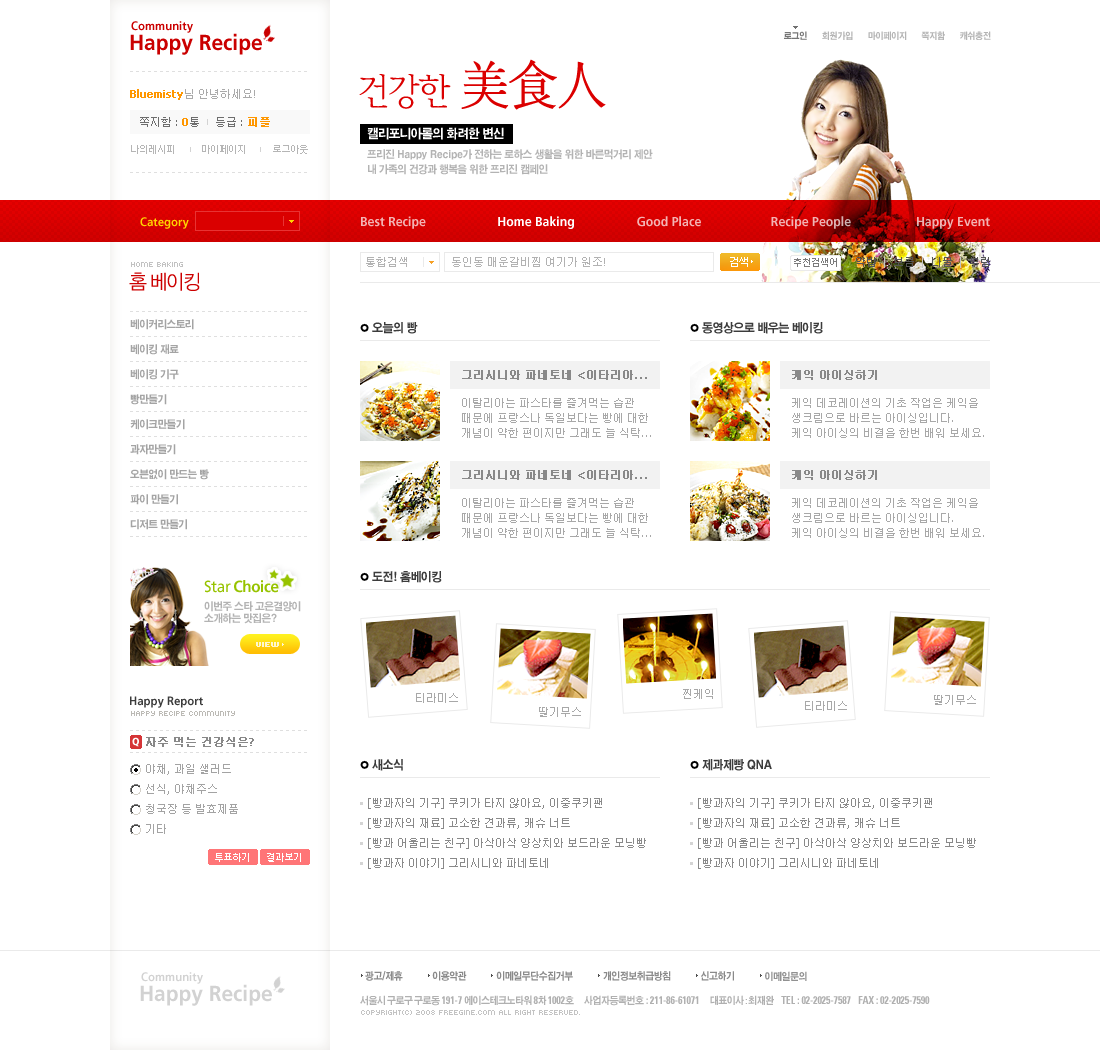
<style>
.page{position:relative;width:1100px;height:1050px;background:#ffffff}
.page>*{position:absolute;margin:0}
.t1{font:22px/20px "Frutiger-Bold";color:#ca0000;scale:0.95 1}
.t2{font:12px/20px "Frutiger-Bold";letter-spacing:-0.1em;color:#ca0000;scale:0.95 1}
.t3{font:12px/20px "Frutiger-Bold";color:#ca0000;scale:0.95 1}
.t4{font:9px "H2gtrE";letter-spacing:-0.03em;color:#b4b4b4;scale:0.9 1}
.t5{font:9px "H2gtrE";letter-spacing:-0.03em;color:#767676;scale:0.9 1}
.t6{font:36px "YDIYMjO220";letter-spacing:-0.05em;color:#db0000}
.t7{font:56px "YDIYMjO230";letter-spacing:-0.05em;color:#db0000;scale:0.95 1}
.t8{font:11px "Tahoma";color:#ff9700;font-weight:bold}
.t9{font:11px "Dotum";color:#aaaaaa}
.t10{font:11px "Tahoma";color:#aaaaaa}
.t11{font:11px "Dotum";color:#6d6d6d}
.t12{font:11px "Tahoma";color:#6d6d6d}
.t13{font:11px "Dotum";color:#ff9700;font-weight:bold}
.t14{font:10px "YDIWebDotum";color:#b5b5b5}
.t15{font:12px "Frutiger-Bold";color:#ffd200;scale:0.95 1}
.t16{font:13px "Frutiger-Bold";color:#f2b3b3;scale:0.95 1}
.t17{font:13px "Frutiger-Bold";color:#ffffff;scale:0.95 1}
.t18{font:13px "Frutiger-Bold";color:#f4b3b3;scale:0.95 1}
.t19{font:13px "Frutiger-Bold";color:#efb3b3;scale:0.95 1}
.t20{font:11px "Dotum";color:#b2b2b2}
.t21{font:11px "Tahoma";color:#b2b2b2}
.t22{font:11px "YDIWebDotum";color:#ffffff}
.t23{font:11px "Dotum";color:#555555}
.t24{font:11px "Tahoma";color:#c4c4c4}
.t25{font:8px "Kroeger0555";color:#c2c2c2}
.t26{font:10px "YDIWebDotum";color:#7a7a7a}
.t27{font:20px "YDIWebDotum";letter-spacing:-0.05em;color:#cc0000;scale:0.95 1}
.t28{font:10.5px/25px "H2gtrE";letter-spacing:-0.05em;color:#a4a4a4;scale:0.92 1}
.t29{font:12px "H2gtrE";letter-spacing:-0.05em;color:#3c3c3c;scale:0.92 1}
.t30{font:11px/100px "Dotum";color:#898989;font-weight:bold}
.t31{font:11px/100px "Tahoma";color:#898989;font-weight:bold}
.t32{font:11px/15px "Dotum";color:#a8a8a8}
.t33{font:11px/15px "Tahoma";color:#a8a8a8}
.t34{font:16px "Frutiger-Bold";letter-spacing:-0.02em;color:#97c300;scale:0.95 1}
.t35{font:16px "Frutiger-Roman";letter-spacing:-0.02em;color:#97c300;scale:0.95 1}
.t36{font:10.5px/12px "H2gtrE";letter-spacing:-0.05em;color:#b3b3b3;scale:0.92 1}
.t37{font:8px "Kroeger0555";color:#fff7cf;font-weight:bold}
.t38{font:11px "Dotum";color:#a8a8a8}
.t39{font:12px "Frutiger-Bold";color:#3c3c3c;scale:0.95 1}
.t40{font:8px "Kroeger0555";color:#bcbab5}
.t41{font:10px "Frutiger-Black";color:#ffffff;scale:0.95 1}
.t42{font:11px "Dotum";color:#888888;font-weight:bold}
.t43{font:11px "Tahoma";color:#888888;font-weight:bold}
.t44{font:11px/20px "Dotum";color:#a3a3a3}
.t45{font:11px/20px "Tahoma";color:#a3a3a3}
.t46{font:11px/20px "Dotum";color:#898989}
.t47{font:11px/20px "Tahoma";color:#898989}
.t48{font:10px "YDIWebDotum";color:#ffffff}
.t49{font:10px "H2gtrE";letter-spacing:-0.05em;color:#8a8a8a;scale:0.9 1}
.t50{font:10px "H2gtrE";letter-spacing:-0.05em;color:#919191;scale:0.9 1}
.t51{font:11px "Univeconbol";letter-spacing:-0.01em;color:#b0b0b0;scale:0.9 1}
.t52{font:10px "H2gtrE";letter-spacing:-0.05em;color:#b0b0b0;scale:0.9 1}
.t53{font:10px "Univeconbol";letter-spacing:-0.05em;color:#b0b0b0;scale:0.9 1}
.t54{font:8px "Kroeger0555";color:#c3c3c3}
</style>
<div class="page">
<p class="t1" style="left:130px;top:21px;width:132px;height:34px"><span class="t2"> </span><span class="t3">Community<br></span>Happy Recipe</p>
<p class="t4" style="left:784px;top:31px;width:207px;height:9px"><span class="t5">로그인</span>      회원가입      마이페이지      쪽지함      캐쉬충전</p>
<p class="t6" style="left:359px;top:59px;width:247px;height:51px">건강한 <span class="t7">美食人</span></p>
<p class="t8" style="left:130px;top:89px;width:125px;height:11px">Bluemisty<span class="t9">님 안녕하세요</span><span class="t10">!</span></p>
<p class="t11" style="left:140px;top:117px;width:130px;height:10px">쪽지함<span class="t12"> : </span><span class="t8">0</span>통     등급<span class="t12"> : </span><span class="t13">피플</span></p>
<p class="t14" style="left:131px;top:145px;width:177px;height:9px">나의레시피             마이페이지             로그아웃</p>
<p class="t15" style="left:140px;top:217px;width:49px;height:12px">Category</p>
<p class="t16" style="left:361px;top:216px;width:65px;height:13px">Best Recipe</p>
<p class="t17" style="left:498px;top:216px;width:76px;height:13px">Home Baking</p>
<p class="t18" style="left:637px;top:216px;width:64px;height:11px">Good Place</p>
<p class="t19" style="left:771px;top:216px;width:80px;height:13px">Recipe People</p>
<p class="t16" style="left:917px;top:217px;width:73px;height:12px">Happy Event</p>
<p class="t20" style="left:366px;top:257px;width:239px;height:10px">통합검색              동인동 매운갈비찜 여기가 원조<span class="t21">!</span></p>
<p class="t22" style="left:730px;top:257px;width:18px;height:10px">검색</p>
<p class="t23" style="left:856px;top:257px;width:133px;height:11px">약밥  <span class="t24">|  </span>보름  <span class="t24">|  </span>나물  <span class="t24">|  </span>부럼</p>
<p class="t25" style="left:131px;top:262px;width:52px;height:5px">home baking</p>
<p class="t26" style="left:794px;top:258px;width:43px;height:9px">추천검색어</p>
<p class="t27" style="left:129px;top:272px;width:71px;height:19px">홈 베이킹</p>
<p class="t28" style="left:130px;top:319px;width:79px;height:211px">베이커리스토리<br>베이킹 재료<br>베이킹 기구<br>빵만들기<br>케이크만들기<br>과자만들기<br>오븐없이 만드는 빵<br>파이 만들기<br>디저트 만들기</p>
<p class="t29" style="left:372px;top:322px;width:46px;height:12px">오늘의 빵</p>
<p class="t29" style="left:702px;top:322px;width:121px;height:12px">동영상으로 배우는 베이킹</p>
<p class="t30" style="left:462px;top:370px;width:185px;height:110px">그리시니와 파네토네<span class="t31"> &lt;</span>이타리아<span class="t31">...<br></span>그리시니와 파네토네<span class="t31"> &lt;</span>이타리아<span class="t31">...</span></p>
<p class="t30" style="left:792px;top:370px;width:85px;height:110px">케익 아이싱하기<br>케익 아이싱하기</p>
<p class="t32" style="left:462px;top:398px;width:189px;height:40px">이탈리아는 파스타를 즐겨먹는 습관 <br>때문에 프랑스나 독일보다는 빵에 대한 <br>개념이 약한 편이지만 그래도 늘 식탁<span class="t33">...</span></p>
<p class="t32" style="left:792px;top:398px;width:192px;height:40px">케익 데코레이션의 기초 작업은 케익을 <br>생크림으로 바르는 아이싱입니다<span class="t33">.<br></span>케익 아이싱의 비결을 한번 배워 보세요<span class="t33">.</span></p>
<p class="t32" style="left:462px;top:498px;width:189px;height:40px">이탈리아는 파스타를 즐겨먹는 습관 <br>때문에 프랑스나 독일보다는 빵에 대한 <br>개념이 약한 편이지만 그래도 늘 식탁<span class="t33">...</span></p>
<p class="t32" style="left:792px;top:498px;width:192px;height:40px">케익 데코레이션의 기초 작업은 케익을 <br>생크림으로 바르는 아이싱입니다<span class="t33">.<br></span>케익 아이싱의 비결을 한번 배워 보세요<span class="t33">.</span></p>
<p class="t34" style="left:204px;top:580px;width:75px;height:13px"><span class="t35">Star </span>Choice</p>
<p class="t29" style="left:372px;top:571px;width:70px;height:12px">도전! 홈베이킹</p>
<p class="t36" style="left:204px;top:601px;width:97px;height:23px">이번주 스타 고은결양이 <br>소개하는 맛집은?</p>
<p class="t37" style="left:256px;top:642px;width:23px;height:5px">view</p>
<p class="t38" style="left:683px;top:689px;width:30px;height:10px">찐케익</p>
<p class="t39" style="left:130px;top:696px;width:73px;height:12px">Happy Report</p>
<p class="t38" style="left:416px;top:693px;width:42px;height:10px">티라미스</p>
<p class="t38" style="left:805px;top:701px;width:42px;height:10px">티라미스</p>
<p class="t38" style="left:934px;top:695px;width:42px;height:10px">딸기무스</p>
<p class="t40" style="left:131px;top:711px;width:104px;height:5px">Happy Recipe community</p>
<p class="t38" style="left:539px;top:707px;width:42px;height:10px">딸기무스</p>
<p class="t41" style="left:132px;top:737px;width:7px;height:10px">Q</p>
<p class="t42" style="left:146px;top:737px;width:108px;height:10px">자주 먹는 건강식은<span class="t43">?</span></p>
<p class="t29" style="left:372px;top:759px;width:31px;height:12px">새소식</p>
<p class="t29" style="left:702px;top:759px;width:70px;height:12px">제과제빵 QNA</p>
<p class="t44" style="left:146px;top:764px;width:92px;height:70px">야채<span class="t45">, </span>과일 샐러드<br>선식<span class="t45">, </span>야채주스<br>청국장 등 발효제품<br>기타</p>
<p class="t46" style="left:368px;top:798px;width:278px;height:71px"><span class="t47">[</span>빵과자의 기구<span class="t47">] </span>쿠키가 타지 않아요<span class="t47">, </span>이중쿠키팬<span class="t47"><br>[</span>빵과자의 재료<span class="t47">] </span>고소한 견과류<span class="t47">, </span>캐슈 너트<span class="t47"><br>[</span>빵과 어울리는 친구<span class="t47">] </span>아삭아삭 양상치와 보드라운 모닝빵<span class="t47"><br>[</span>빵과자 이야기<span class="t47">] </span>그리시니와 파네토네</p>
<p class="t46" style="left:698px;top:798px;width:278px;height:71px"><span class="t47">[</span>빵과자의 기구<span class="t47">] </span>쿠키가 타지 않아요<span class="t47">, </span>이중쿠키팬<span class="t47"><br>[</span>빵과자의 재료<span class="t47">] </span>고소한 견과류<span class="t47">, </span>캐슈 너트<span class="t47"><br>[</span>빵과 어울리는 친구<span class="t47">] </span>아삭아삭 양상치와 보드라운 모닝빵<span class="t47"><br>[</span>빵과자 이야기<span class="t47">] </span>그리시니와 파네토네</p>
<p class="t48" style="left:215px;top:853px;width:34px;height:9px">투표하기</p>
<p class="t48" style="left:267px;top:853px;width:34px;height:9px">결과보기</p>
<p class="t49" style="left:365px;top:971px;width:442px;height:10px">광고/제휴            이용약관            이메일무단수집거부            개인정보취급방침            신고하기            <span class="t50">이메일문의</span></p>
<p class="t51" style="left:360px;top:995px;width:570px;height:11px"><span class="t52">서울시 구로구 구로동</span> 191-7 <span class="t52">에이스테크노타워 </span>8<span class="t52">차 </span>1002<span class="t52">호       사업자등록번호 </span>: 211-86-61071       <span class="t52">대표이사</span><span class="t53"> : </span><span class="t52">최재완     </span>TEL : 02-2025-7587     FAX : 02-2025-7590</p>
<p class="t54" style="left:361px;top:1010px;width:219px;height:5px">Copyright(C) 2008 Freegine.com All Right Reserved.</p>
</div>
